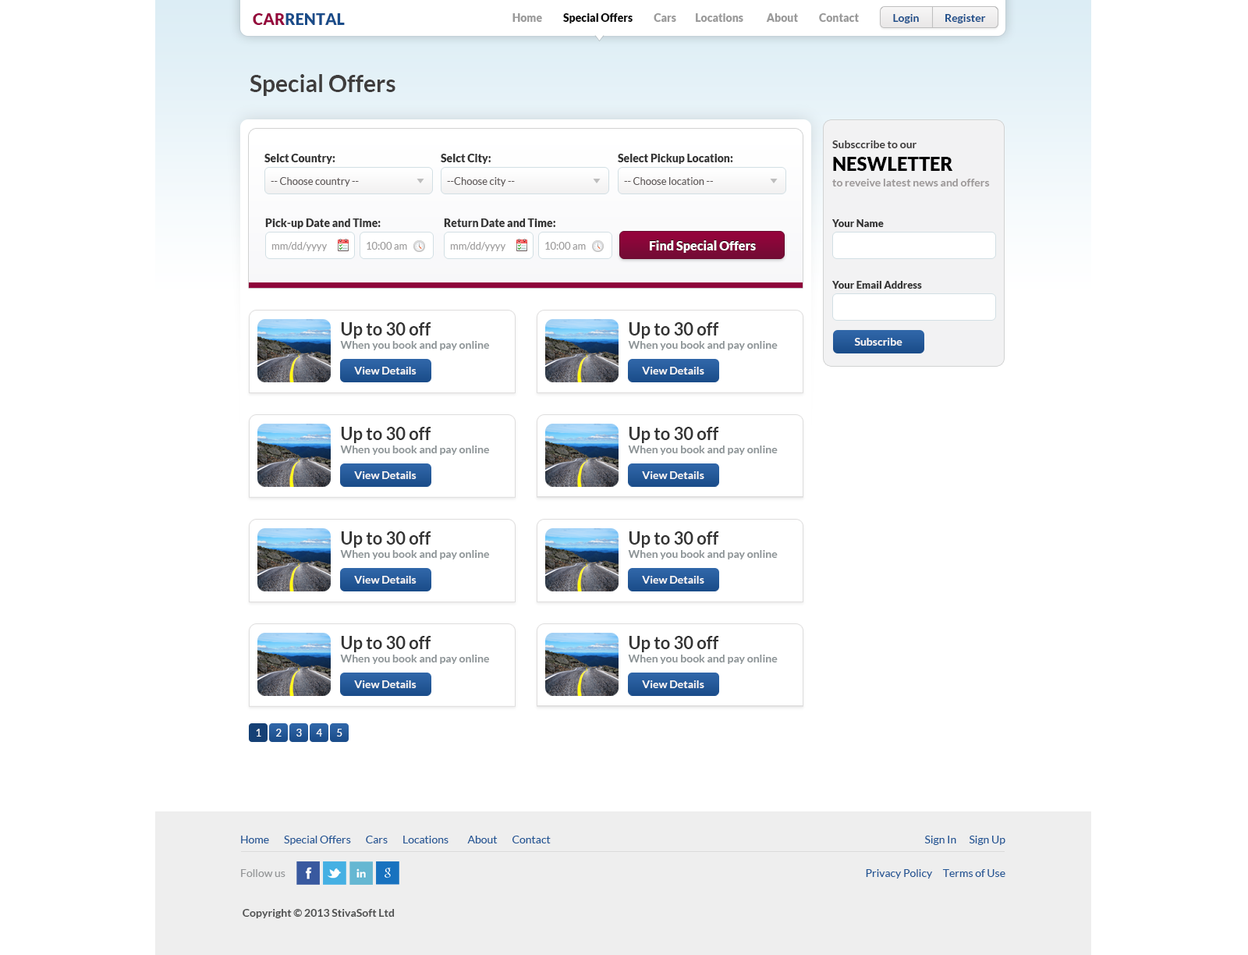
<style>
.page{position:relative;width:1248px;height:955px;background:#ffffff}
.page>*{position:absolute;margin:0}
.t1{font:15.6px "Lato-Black";color:#1a4c89;text-transform:uppercase}
.t2{font:15.6px "Lato-Black";color:#95033b;text-transform:uppercase}
.t3{font:10.9px "Lato-Black";color:#9a9a9a}
.t4{font:10.9px "Lato-Black";color:#0a0a0a}
.t5{font:11px "Lato-Bold";color:#1a4c89}
.t6{font:23.4px "Lato-Bold";color:#3f3d3d}
.t7{font:10.9px/15.6px "Lato-Bold";color:#9c9898}
.t8{font:10.9px "Lato-Bold";color:#393737}
.t9{font:18.7px "Lato-Black";color:#000000;text-transform:uppercase}
.t10{font:10.9px "Lato-Black";color:#333333}
.t11{font:10.1px "Lato-Regular";color:#5e5858}
.t12{font:10.1px "Lato-Black";color:#333333}
.t13{font:10.1px "Lato-Regular";color:#9e9d9d}
.t14{font:12.5px "Lato-Black";color:#ffffff}
.t15{font:10.9px "Lato-Bold";color:#8c9396}
.t16{font:17.2px "Lato-Bold";color:#333333}
.t17{font:17.1px "Lato-Bold";color:#333333}
.t18{font:10.9px "Lato-Bold";color:#f7f6f6}
.t19{font:10.1px "Lato-Regular";color:#ffffff}
.t20{font:10.9px "Lato-Regular";color:#225695}
.t21{font:10.9px "Lato-Regular";color:#949698}
.t22{font:10.9px "Lato-Bold";color:#4f5050}
</style>
<div class="page">
<p class="t1" style="left:253px;top:13px;width:92px;height:12px"><span class="t2">car</span>rental</p>
<p class="t3" style="left:513px;top:13px;width:346px;height:10px">Home         <span class="t4"> Special Offers   </span>       Cars         Locations           About          Contact</p>
<p class="t5" style="left:893px;top:14px;width:93px;height:9px">Login            Register</p>
<p class="t6" style="left:250px;top:74px;width:146px;height:22px">Special Offers</p>
<p class="t7" style="left:833px;top:140px;width:157px;height:46px"><span class="t8">Subsccribe to our <br></span><span class="t9">neswletter<br></span>to reveive latest news and offers</p>
<p class="t10" style="left:265px;top:154px;width:71px;height:10px">Selct Country:</p>
<p class="t10" style="left:441px;top:154px;width:50px;height:10px">Selct City:</p>
<p class="t10" style="left:618px;top:154px;width:115px;height:10px">Select Pickup Location:</p>
<p class="t11" style="left:271px;top:177px;width:88px;height:9px">-- Choose country --</p>
<p class="t11" style="left:447px;top:177px;width:68px;height:9px">--Choose city --</p>
<p class="t11" style="left:624px;top:177px;width:89px;height:8px">-- Choose location --</p>
<p class="t10" style="left:265px;top:218px;width:116px;height:11px">Pick-up Date and Time:</p>
<p class="t10" style="left:444px;top:218px;width:112px;height:9px">Return Date and Time:</p>
<p class="t12" style="left:833px;top:219px;width:51px;height:8px">Your Name</p>
<p class="t13" style="left:272px;top:242px;width:56px;height:9px">mm/dd/yyyy</p>
<p class="t13" style="left:367px;top:242px;width:40px;height:8px">10:00 am</p>
<p class="t13" style="left:450px;top:242px;width:56px;height:9px">mm/dd/yyyy</p>
<p class="t13" style="left:545px;top:242px;width:41px;height:8px">10:00 am</p>
<p class="t14" style="left:650px;top:240px;width:106px;height:13px">Find Special Offers</p>
<p class="t12" style="left:833px;top:281px;width:89px;height:8px">Your Email Address</p>
<p class="t15" style="left:340px;top:322px;width:150px;height:28px"><span class="t16">Up to 30 off <br></span>When you book and pay online</p>
<p class="t15" style="left:628px;top:322px;width:150px;height:28px"><span class="t17">Up to 30 off <br></span>When you book and pay online</p>
<p class="t18" style="left:854px;top:338px;width:49px;height:8px">Subscribe</p>
<p class="t18" style="left:354px;top:367px;width:63px;height:8px">View Details</p>
<p class="t18" style="left:642px;top:367px;width:63px;height:8px">View Details</p>
<p class="t15" style="left:340px;top:427px;width:150px;height:28px"><span class="t17">Up to 30 off <br></span>When you book and pay online</p>
<p class="t15" style="left:628px;top:427px;width:150px;height:28px"><span class="t17">Up to 30 off <br></span>When you book and pay online</p>
<p class="t18" style="left:354px;top:471px;width:63px;height:8px">View Details</p>
<p class="t18" style="left:642px;top:471px;width:63px;height:8px">View Details</p>
<p class="t15" style="left:340px;top:531px;width:150px;height:28px"><span class="t16">Up to 30 off <br></span>When you book and pay online</p>
<p class="t15" style="left:628px;top:531px;width:150px;height:28px"><span class="t17">Up to 30 off <br></span>When you book and pay online</p>
<p class="t18" style="left:354px;top:576px;width:63px;height:8px">View Details</p>
<p class="t18" style="left:642px;top:576px;width:63px;height:8px">View Details</p>
<p class="t15" style="left:340px;top:636px;width:150px;height:28px"><span class="t17">Up to 30 off <br></span>When you book and pay online</p>
<p class="t15" style="left:628px;top:636px;width:150px;height:28px"><span class="t17">Up to 30 off <br></span>When you book and pay online</p>
<p class="t18" style="left:354px;top:680px;width:63px;height:8px">View Details</p>
<p class="t18" style="left:642px;top:680px;width:63px;height:8px">View Details</p>
<p class="t19" style="left:256px;top:729px;width:5px;height:8px">1</p>
<p class="t19" style="left:276px;top:729px;width:6px;height:8px">2</p>
<p class="t19" style="left:297px;top:729px;width:5px;height:8px">3</p>
<p class="t19" style="left:316px;top:729px;width:6px;height:8px">4</p>
<p class="t19" style="left:337px;top:729px;width:6px;height:8px">5</p>
<p class="t20" style="left:241px;top:836px;width:310px;height:9px">Home       Special Offers       Cars       Locations         About       Contact</p>
<p class="t20" style="left:925px;top:836px;width:81px;height:9px">Sign In      Sign Up</p>
<p class="t21" style="left:241px;top:869px;width:45px;height:8px">Follow us</p>
<p class="t20" style="left:866px;top:869px;width:140px;height:10px">Privacy Policy     Terms of Use</p>
<p class="t22" style="left:243px;top:909px;width:152px;height:9px">Copyright © 2013 StivaSoft Ltd</p>
</div>
